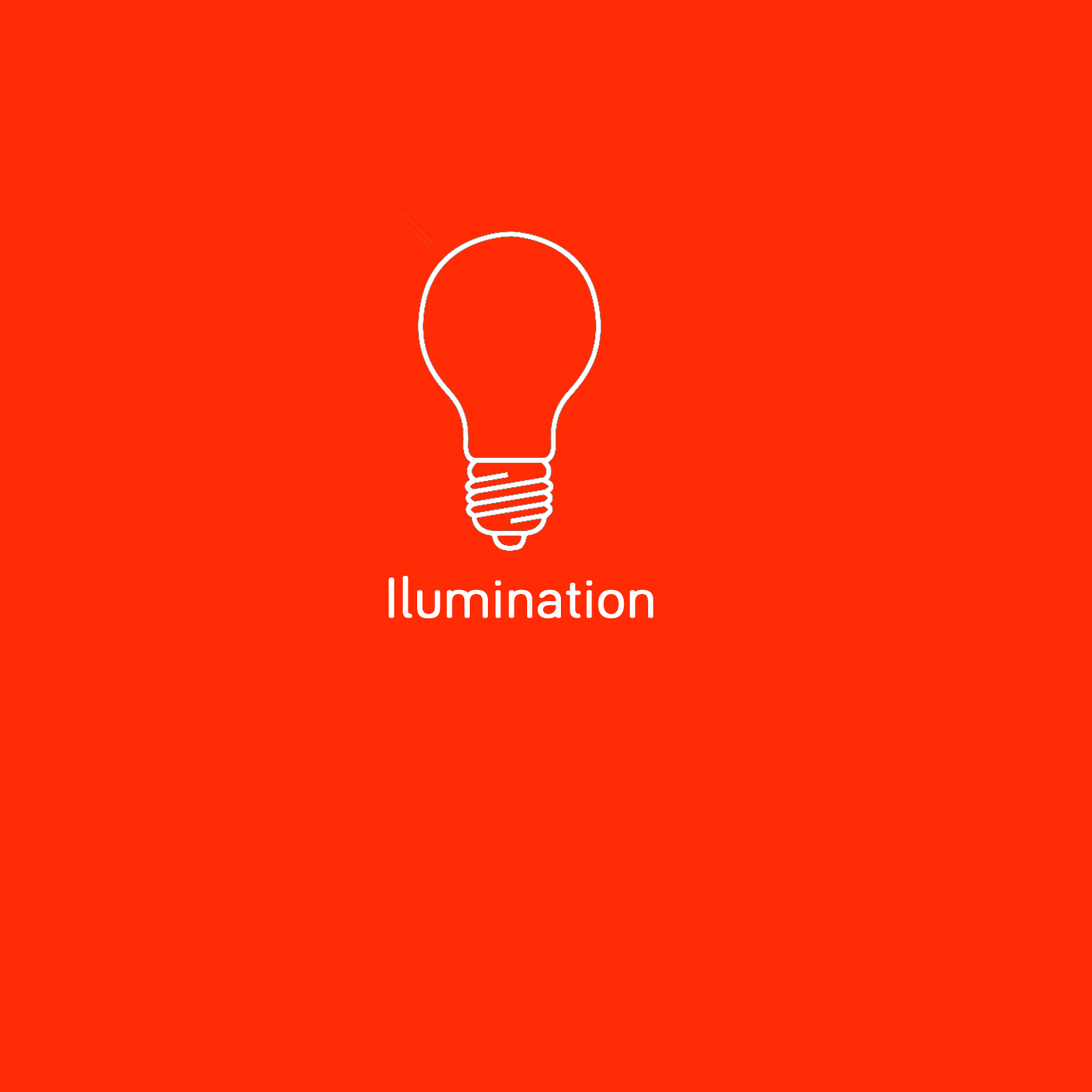
<style>
.page{position:relative;width:1092px;height:1092px;background:#ff2b04}
.page>*{position:absolute;margin:0}
.t1{font:57.3px "Bariol-Regular";letter-spacing:0.01em;color:#ffffff;font-weight:bold}
</style>
<div class="page">
<p class="t1" style="left:388px;top:576px;width:266px;height:42px">Ilumination</p>
</div>
